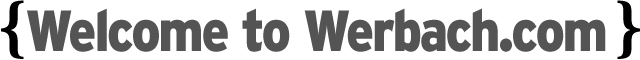
<style>
.page{position:relative;width:640px;height:60px;background:#ffffff}
.page>*{position:absolute;margin:0}
.t1{font:68px "BenguiatITCbyBT-Bold";letter-spacing:-0.05em;color:#000000}
.t2{font:58px "Interstate-Black";letter-spacing:-0.05em;color:#555454;scale:0.9 1}
.t3{font:58px "Interstate-Black";letter-spacing:-0.09em;color:#555454;scale:0.9 1}
.t4{font:58px "Interstate-Black";letter-spacing:-0.04em;color:#555454;scale:0.9 1}
</style>
<div class="page">
<p class="t1" style="left:1px;top:0px;width:23px;height:59px">{</p>
<p class="t1" style="left:617px;top:0px;width:23px;height:59px">}</p>
<p class="t2" style="left:27px;top:8px;width:579px;height:44px"><span class="t3">W</span><span class="t4">e</span>lcome to <span class="t3">W</span><span class="t4">e</span>rbach.com</p>
</div>
